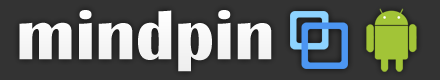
<style>
.page{position:relative;width:440px;height:80px;background:#333333}
.page>*{position:absolute;margin:0}
.t1{font:72px "BritannicBold";color:#f7f7f7}
</style>
<div class="page">
<p class="t1" style="left:19px;top:10px;width:253px;height:62px">mindpin</p>
</div>
